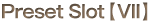
<style>
.page{position:relative;width:150px;height:23px;background:#ffffff}
.page>*{position:absolute;margin:0}
.t1{font:18px "GothicMB101Pro-DeBold";letter-spacing:-0.04em}
</style>
<div class="page">
<p class="t1" style="left:2px;top:2px;width:146px;height:19px">Preset Slot【     】</p>
<p class="t1" style="left:117px;top:4px;width:23px;height:15px">VII</p>
</div>
